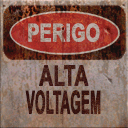
<style>
.page{position:relative;width:128px;height:128px}
.page>*{position:absolute;margin:0}
.t1{font:24.3px "Arial-BoldMT";letter-spacing:0.005em;color:#bbaca6;font-weight:bold;scale:0.74 1}
.t2{font:31.7px/28px "Arial-BoldMT";letter-spacing:0.005em;color:#441412;font-weight:bold;scale:0.41 1}
.t3{font:28px/28px "Arial-BoldMT";letter-spacing:0.005em;color:#441412;font-weight:bold;scale:0.67 1}
</style>
<div class="page">
<p class="t1" style="left:28px;top:23px;width:72px;height:19px">PERIGO</p>
<p class="t2" style="left:25px;top:65px;width:76px;height:50px;text-align:center"><span class="t3">ALTA<br></span>VOLTAGEM</p>
</div>
